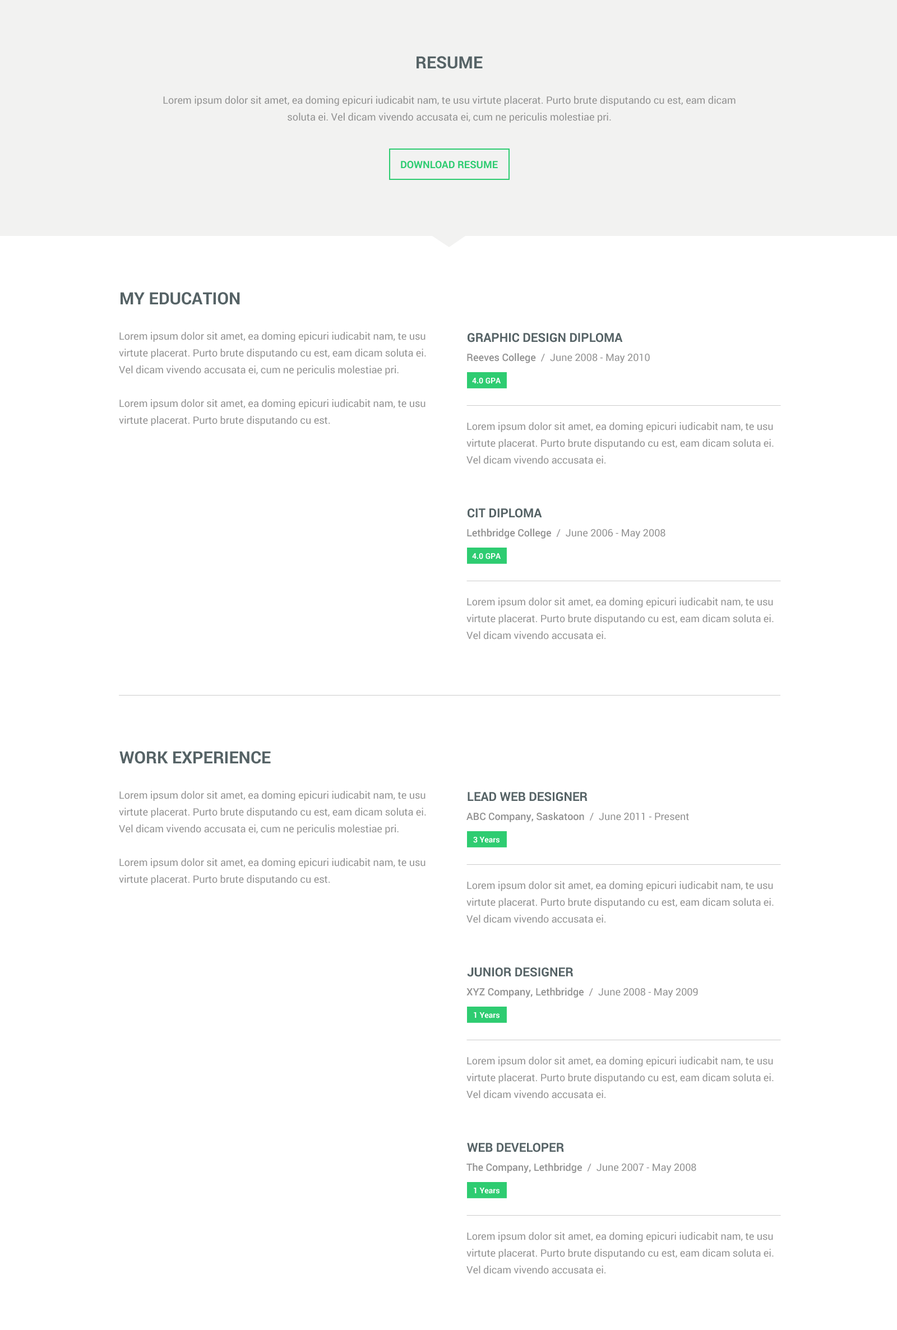
<style>
.page{position:relative;width:897px;height:1330px;background:#ffffff}
.page>*{position:absolute;margin:0}
.t1{font:16.8px "Roboto-Bold";color:#566366;text-transform:uppercase}
.t2{font:10.1px/16.8px "Roboto-Regular";color:#919191}
.t3{font:10.1px "Roboto-Bold";color:#2ecc71;text-transform:uppercase}
.t4{font:12.3px "Roboto-Bold";color:#566366;text-transform:uppercase}
.t5{font:10.1px "Roboto-Regular";color:#919191}
.t6{font:10.1px "Roboto-Medium";color:#919191}
.t7{font:7.8px "Roboto-Bold";color:#ffffff}
</style>
<div class="page">
<p class="t1" style="left:416px;top:56px;width:67px;height:13px">Resume</p>
<p class="t2" style="left:163px;top:96px;width:572px;height:27px;text-align:center">Lorem ipsum dolor sit amet, ea doming epicuri iudicabit nam, te usu virtute placerat. Purto brute disputando cu est, eam dicam soluta ei. Vel dicam vivendo accusata ei, cum ne periculis molestiae pri.</p>
<p class="t3" style="left:401px;top:161px;width:97px;height:8px">Download Resume</p>
<p class="t1" style="left:120px;top:292px;width:120px;height:13px">My Education</p>
<p class="t2" style="left:119px;top:332px;width:307px;height:94px">Lorem ipsum dolor sit amet, ea doming epicuri iudicabit nam, te usu virtute placerat. Purto brute disputando cu est, eam dicam soluta ei. Vel dicam vivendo accusata ei, cum ne periculis molestiae pri. <br><br>Lorem ipsum dolor sit amet, ea doming epicuri iudicabit nam, te usu virtute placerat. Purto brute disputando cu est.</p>
<p class="t4" style="left:467px;top:333px;width:156px;height:9px">Graphic Design Diploma</p>
<p class="t5" style="left:467px;top:353px;width:183px;height:10px"><span class="t6">Reeves College  </span>/  June 2008 - May 2010</p>
<p class="t7" style="left:472px;top:378px;width:28px;height:6px">4.0 GPA</p>
<p class="t2" style="left:466px;top:422px;width:307px;height:42px">Lorem ipsum dolor sit amet, ea doming epicuri iudicabit nam, te usu virtute placerat. Purto brute disputando cu est, eam dicam soluta ei. Vel dicam vivendo accusata ei.</p>
<p class="t4" style="left:467px;top:508px;width:75px;height:10px">CIT Diploma</p>
<p class="t5" style="left:467px;top:528px;width:198px;height:11px"><span class="t6">Lethbridge College  </span>/  June 2006 - May 2008</p>
<p class="t7" style="left:472px;top:553px;width:28px;height:6px">4.0 GPA</p>
<p class="t2" style="left:466px;top:597px;width:307px;height:42px">Lorem ipsum dolor sit amet, ea doming epicuri iudicabit nam, te usu virtute placerat. Purto brute disputando cu est, eam dicam soluta ei. Vel dicam vivendo accusata ei.</p>
<p class="t1" style="left:119px;top:751px;width:152px;height:13px">Work Experience</p>
<p class="t2" style="left:119px;top:791px;width:307px;height:94px">Lorem ipsum dolor sit amet, ea doming epicuri iudicabit nam, te usu virtute placerat. Purto brute disputando cu est, eam dicam soluta ei. Vel dicam vivendo accusata ei, cum ne periculis molestiae pri. <br><br>Lorem ipsum dolor sit amet, ea doming epicuri iudicabit nam, te usu virtute placerat. Purto brute disputando cu est.</p>
<p class="t4" style="left:467px;top:792px;width:120px;height:9px">Lead WEb Designer</p>
<p class="t6" style="left:466px;top:812px;width:223px;height:10px">ABC Company, Saskatoon  <span class="t5">/  June 2011 - Present</span></p>
<p class="t7" style="left:473px;top:837px;width:26px;height:6px">3 Years</p>
<p class="t2" style="left:466px;top:881px;width:307px;height:42px">Lorem ipsum dolor sit amet, ea doming epicuri iudicabit nam, te usu virtute placerat. Purto brute disputando cu est, eam dicam soluta ei. Vel dicam vivendo accusata ei.</p>
<p class="t4" style="left:467px;top:967px;width:106px;height:10px">Junior Designer</p>
<p class="t6" style="left:466px;top:987px;width:232px;height:11px">XYZ Company, Lethbridge  <span class="t5">/  June 2008 - May 2009</span></p>
<p class="t7" style="left:474px;top:1012px;width:25px;height:6px">1 Years</p>
<p class="t2" style="left:466px;top:1056px;width:307px;height:42px">Lorem ipsum dolor sit amet, ea doming epicuri iudicabit nam, te usu virtute placerat. Purto brute disputando cu est, eam dicam soluta ei. Vel dicam vivendo accusata ei.</p>
<p class="t4" style="left:467px;top:1143px;width:97px;height:9px">Web Developer</p>
<p class="t6" style="left:466px;top:1163px;width:230px;height:10px">The Company, Lethbridge  <span class="t5">/  June 2007 - May 2008</span></p>
<p class="t7" style="left:474px;top:1188px;width:25px;height:6px">1 Years</p>
<p class="t2" style="left:466px;top:1232px;width:307px;height:42px">Lorem ipsum dolor sit amet, ea doming epicuri iudicabit nam, te usu virtute placerat. Purto brute disputando cu est, eam dicam soluta ei. Vel dicam vivendo accusata ei.</p>
</div>
